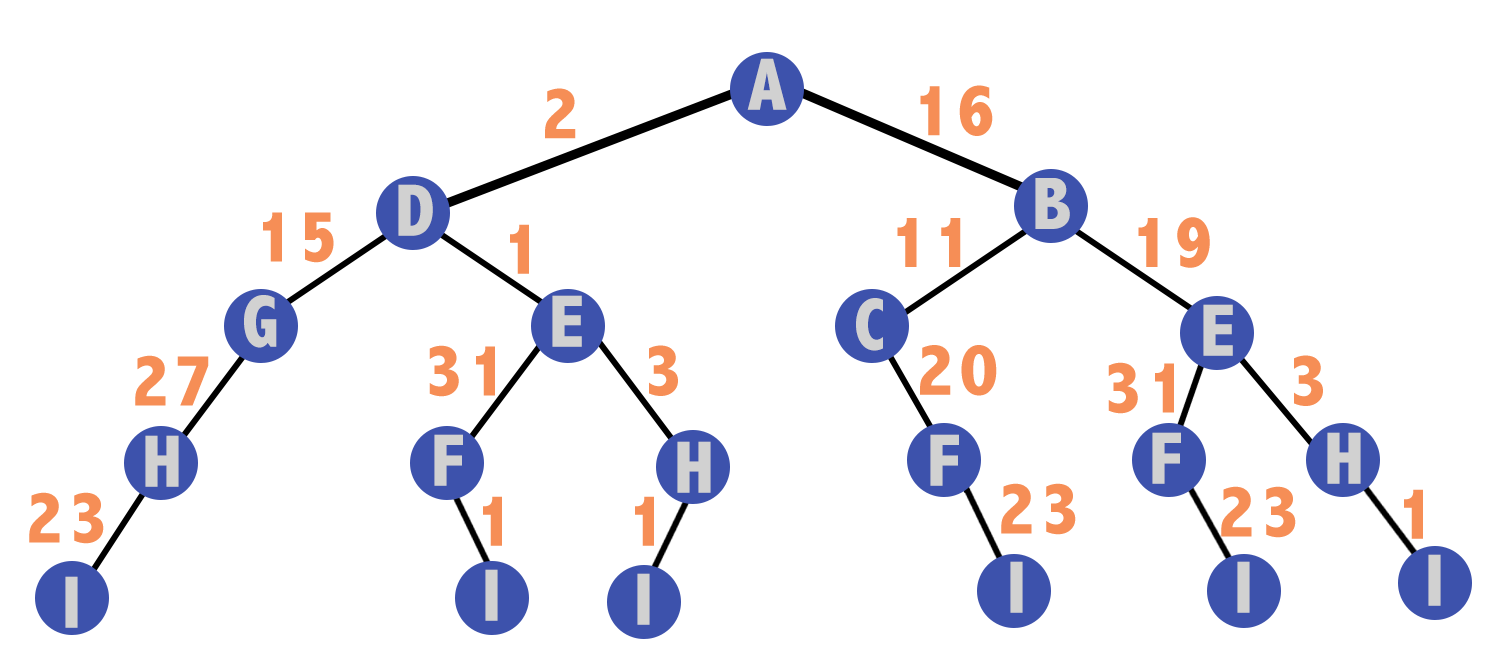
<style>
.page{position:relative;width:1500px;height:665px;background:#ffffff}
.page>*{position:absolute;margin:0}
.t1{font:75px "AbadiMT-CondensedExtraBold";letter-spacing:0.075em;color:#d1d1d1}
.t2{font:75px "AbadiMT-CondensedExtraBold";letter-spacing:0.075em;color:#f68e56}
</style>
<div class="page">
<p class="t1" style="left:747px;top:58px;width:40px;height:52px">A</p>
<p class="t2" style="left:545px;top:88px;width:31px;height:51px">2</p>
<p class="t2" style="left:920px;top:85px;width:73px;height:51px">16</p>
<p class="t1" style="left:398px;top:184px;width:35px;height:52px">D</p>
<p class="t1" style="left:1035px;top:178px;width:35px;height:51px">B</p>
<p class="t2" style="left:263px;top:212px;width:71px;height:51px">15</p>
<p class="t2" style="left:897px;top:218px;width:64px;height:49px">11</p>
<p class="t2" style="left:1138px;top:217px;width:72px;height:51px">19</p>
<p class="t2" style="left:510px;top:224px;width:19px;height:50px">1</p>
<p class="t1" style="left:244px;top:295px;width:33px;height:53px">G</p>
<p class="t1" style="left:552px;top:295px;width:30px;height:52px">E</p>
<p class="t1" style="left:856px;top:298px;width:27px;height:53px">C</p>
<p class="t1" style="left:1203px;top:304px;width:30px;height:52px">E</p>
<p class="t2" style="left:429px;top:345px;width:66px;height:52px">31</p>
<p class="t2" style="left:649px;top:345px;width:29px;height:51px">3</p>
<p class="t2" style="left:920px;top:345px;width:77px;height:51px">20</p>
<p class="t2" style="left:135px;top:355px;width:74px;height:51px">27</p>
<p class="t2" style="left:1108px;top:362px;width:66px;height:52px">31</p>
<p class="t2" style="left:1294px;top:355px;width:29px;height:51px">3</p>
<p class="t1" style="left:145px;top:435px;width:34px;height:52px">H</p>
<p class="t1" style="left:434px;top:434px;width:29px;height:52px">F</p>
<p class="t1" style="left:930px;top:434px;width:29px;height:52px">F</p>
<p class="t1" style="left:1152px;top:432px;width:29px;height:52px">F</p>
<p class="t1" style="left:1327px;top:432px;width:34px;height:52px">H</p>
<p class="t1" style="left:677px;top:441px;width:34px;height:52px">H</p>
<p class="t2" style="left:1001px;top:483px;width:75px;height:52px">23</p>
<p class="t2" style="left:1221px;top:486px;width:75px;height:52px">23</p>
<p class="t2" style="left:29px;top:492px;width:75px;height:52px">23</p>
<p class="t2" style="left:483px;top:496px;width:19px;height:50px">1</p>
<p class="t2" style="left:635px;top:496px;width:19px;height:50px">1</p>
<p class="t2" style="left:1404px;top:489px;width:19px;height:50px">1</p>
<p class="t1" style="left:1428px;top:554px;width:13px;height:52px">I</p>
<p class="t1" style="left:485px;top:569px;width:13px;height:52px">I</p>
<p class="t1" style="left:1010px;top:561px;width:13px;height:52px">I</p>
<p class="t1" style="left:1237px;top:561px;width:13px;height:52px">I</p>
<p class="t1" style="left:65px;top:576px;width:13px;height:52px">I</p>
<p class="t1" style="left:637px;top:573px;width:13px;height:52px">I</p>
</div>
